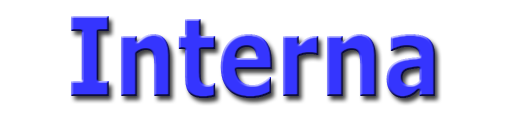
<style>
.page{position:relative;width:512px;height:128px;background:#ffffff}
.page>*{position:absolute;margin:0}
.t1{font:109.7px "Verdana-Bold";color:#3535fe;scale:0.81 1}
</style>
<div class="page">
<p class="t1" style="left:71px;top:16px;width:364px;height:82px">Interna</p>
</div>
